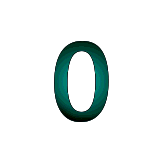
<style>
.page{position:relative;width:162px;height:162px;background:#ffffff}
.page>*{position:absolute;margin:0}
.t1{font:112.5px "YuGothicUI-Semibold"}
</style>
<div class="page">
<p class="t1" style="left:54px;top:41px;width:55px;height:81px">0</p>
<p class="t1" style="left:54px;top:41px;width:55px;height:81px">0</p>
<p class="t1" style="left:54px;top:41px;width:55px;height:81px">0</p>
<p class="t1" style="left:54px;top:41px;width:55px;height:81px">0</p>
</div>
